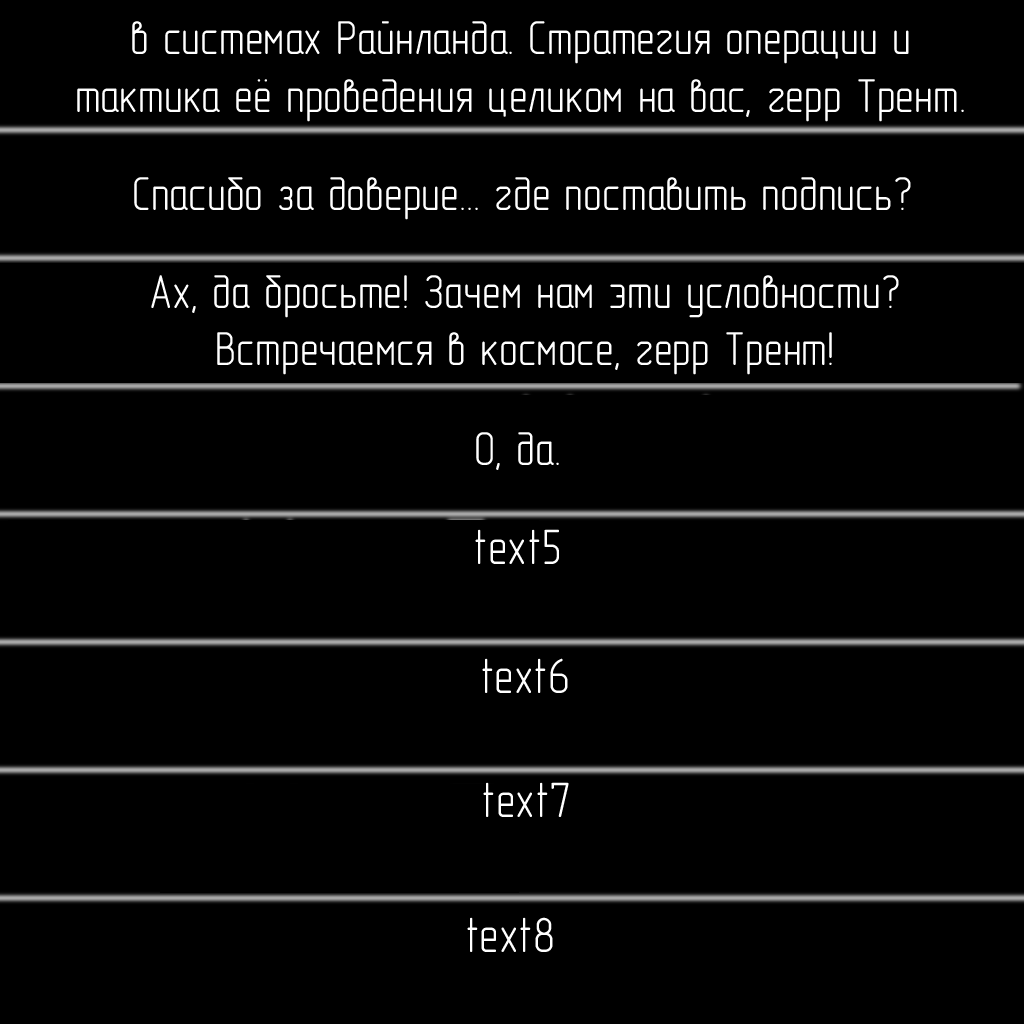
<style>
.page{position:relative;width:1024px;height:1024px;background:#000000}
.page>*{position:absolute;margin:0}
.t1{font:48px "GOST-2.304-81typeA";color:#ffffff}
.t2{font:50px "GOST-2.304-81typeA";color:#ffffff}
</style>
<div class="page">
<p class="t1" style="left:77px;top:21px;width:887px;height:101px;text-align:center">в системах Райнланда. Стратегия операции и<br>тактика её проведения целиком на вас, герр Трент.</p>
<p class="t1" style="left:134px;top:177px;width:777px;height:43px">Спасибо за доверие... где поставить подпись?</p>
<p class="t1" style="left:151px;top:275px;width:748px;height:100px;text-align:center">Ах, да бросьте! Зачем нам эти условности?<br>Встречаемся в космосе, герр Трент!</p>
<p class="t1" style="left:476px;top:432px;width:83px;height:38px">О, да.</p>
<p class="t2" style="left:475px;top:529px;width:84px;height:35px">text5</p>
<p class="t2" style="left:482px;top:658px;width:86px;height:35px">text6</p>
<p class="t2" style="left:483px;top:782px;width:86px;height:35px">text7</p>
<p class="t2" style="left:467px;top:917px;width:86px;height:35px">text8</p>
</div>
